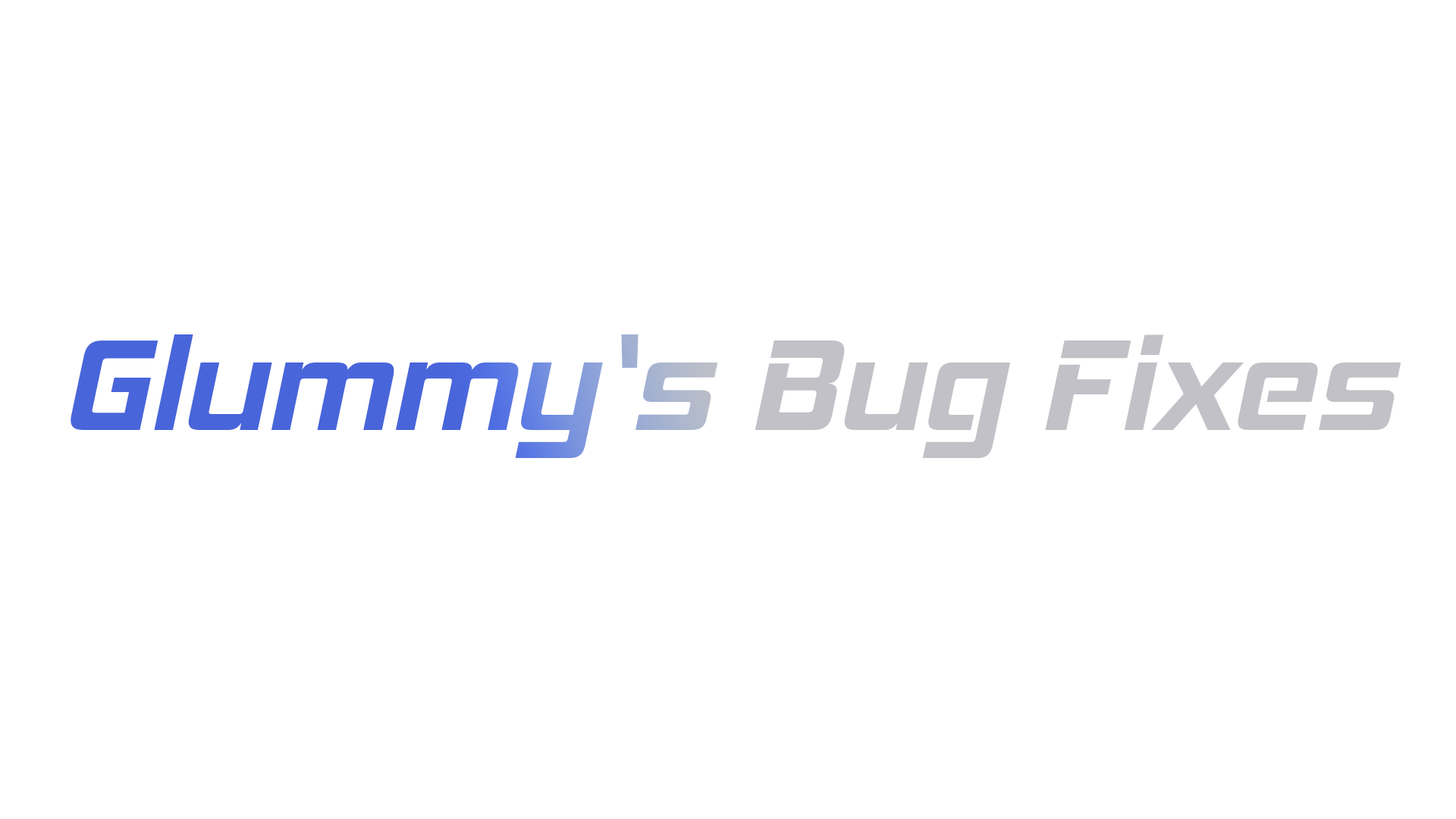
<style>
.page{position:relative;width:1456px;height:819px;background:#ffffff}
.page>*{position:absolute;margin:0}
.t1{font:132.7px "HemiHeadRg-BoldItalic"}
</style>
<div class="page">
<p class="t1" style="left:71px;top:334px;width:1330px;height:124px">Glummy‘s Bug Fixes</p>
</div>
